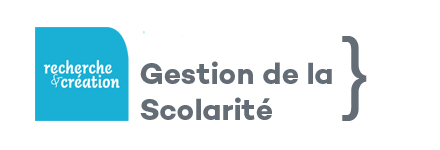
<style>
.page{position:relative;width:440px;height:150px;background:#ffffff}
.page>*{position:absolute;margin:0}
.t1{font:92px "HelveticaNeue";color:#646c76}
.t2{font:114px "HelveticaNeue";color:#646c76}
.t3{font:30px "Campton-Bold";color:#646c76}
</style>
<div class="page">
<p class="t1" style="left:342px;top:36px;width:25px;height:85px"><span class="t2">      </span>}</p>
<p class="t3" style="left:140px;top:61px;width:192px;height:59px">Gestion de la<br>Scolarité</p>
</div>
